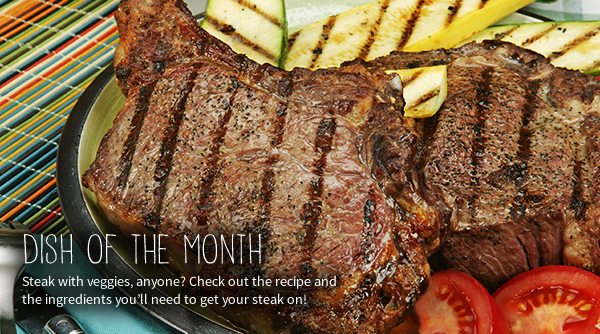
<style>
.page{position:relative;width:600px;height:334px}
.page>*{position:absolute;margin:0}
.t1{font:36.7px "DKPisang";color:#ffffff}
.t2{font:14px/18px "SourceSansPro-Regular";color:#ffffff}
</style>
<div class="page">
<p class="t1" style="left:23px;top:234px;width:238px;height:30px">DISH OF THE MONTH</p>
<p class="t2" style="left:22px;top:275px;width:314px;height:32px">Steak with veggies, anyone? Check out the recipe and the ingredients you’ll need to get your steak on!</p>
</div>
